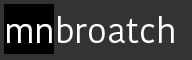
<style>
.page{position:relative;width:192px;height:60px;background:#333333}
.page>*{position:absolute;margin:0}
.t1{font:34.7px "KohinoorDevanagari-Regular";color:#ffffff}
</style>
<div class="page">
<p class="t1" style="left:7px;top:16px;width:167px;height:27px">mnbroatch</p>
</div>
